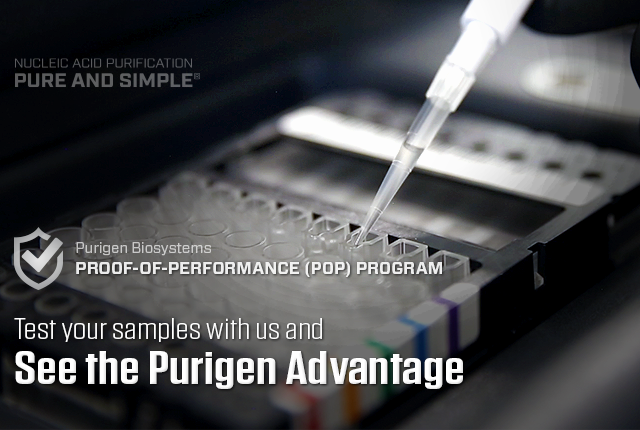
<style>
.page{position:relative;width:640px;height:430px}
.page>*{position:absolute;margin:0}
.t1{font:15px "Forza-Book";letter-spacing:-0.007em;color:#c9c9c8}
.t2{font:17px "Forza-Bold";color:#eeeeee;text-transform:uppercase}
.t3{font:30px/45px "Tungsten-Light";color:#ffffff;scale:1.33 1}
.t4{font:46px/45px "Tungsten-Semibold";color:#ffffff;scale:1.33 1}
</style>
<div class="page">
<p class="t1" style="left:76px;top:242px;width:135px;height:14px">Purigen Biosystems</p>
<p class="t2" style="left:76px;top:261px;width:366px;height:16px">Proof-of-Performance (POP) Program</p>
<p class="t3" style="left:14px;top:318px;width:449px;height:71px">Test your samples with us and<br><span class="t4">See the Purigen Advantage</span></p>
</div>
